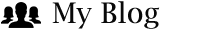
<style>
.page{position:relative;width:200px;height:30px;background:#ffffff}
.page>*{position:absolute;margin:0}
.t1{font:28.3px "LucidaBright";color:#090909}
</style>
<div class="page">
<p class="t1" style="left:52px;top:1px;width:108px;height:28px">My Blog</p>
</div>
